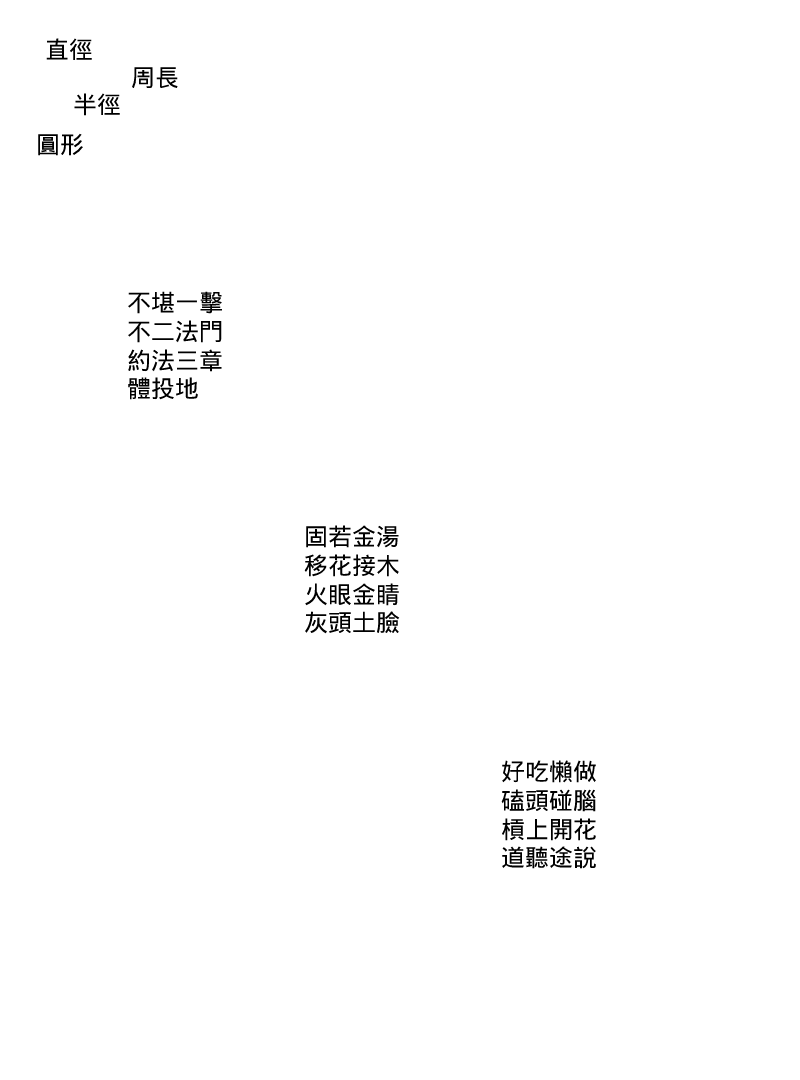
<style>
.page{position:relative;width:800px;height:1080px;background:#ffffff}
.page>*{position:absolute;margin:0}
.t1{font:24px "DroidSansFallback";color:#000000}
</style>
<div class="page">
<p class="t1" style="left:46px;top:38px;width:46px;height:23px">直徑</p>
<p class="t1" style="left:132px;top:67px;width:46px;height:22px">周長</p>
<p class="t1" style="left:74px;top:93px;width:46px;height:23px">半徑</p>
<p class="t1" style="left:38px;top:133px;width:45px;height:23px">圓形</p>
<p class="t1" style="left:128px;top:291px;width:94px;height:109px">不堪一擊<br>不二法門<br>約法三章<br>體投地</p>
<p class="t1" style="left:304px;top:525px;width:96px;height:109px">固若金湯<br>移花接木<br>火眼金睛<br>灰頭土臉</p>
<p class="t1" style="left:501px;top:760px;width:95px;height:109px">好吃懶做<br>磕頭碰腦<br>槓上開花<br>道聽途說</p>
</div>
